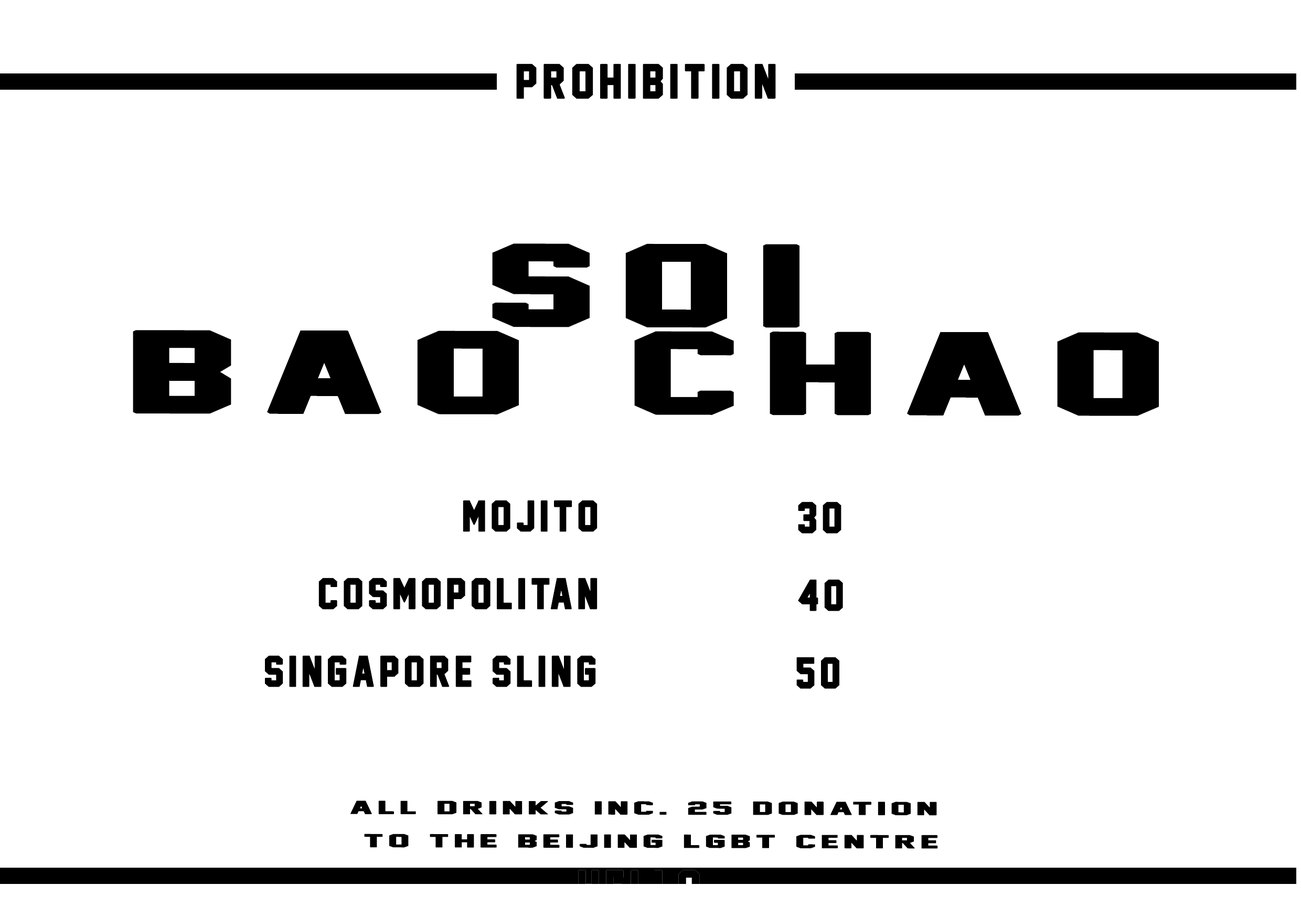
<style>
.page{position:relative;width:1301px;height:917px;background:#ffffff}
.page>*{position:absolute;margin:0}
.t1{font:43.7px "JerseyM54";letter-spacing:0.1em;color:#000000;font-weight:bold}
.t2{font:104.9px/87.4px "JerseyM54";letter-spacing:0.1em;color:#000000;font-weight:bold;scale:2.04 1}
.t3{font:39.3px "JerseyM54";letter-spacing:0.1em;color:#000000;font-weight:bold}
.t4{font:39.6px "JerseyM54";letter-spacing:0.1em;color:#000000;font-weight:bold}
.t5{font:16.8px/33.2px "JerseyM54";letter-spacing:0.1em;color:#000000;font-weight:bold;scale:2.4 1}
</style>
<div class="page">
<p class="t1" style="left:516px;top:63px;width:260px;height:36px">prohibition</p>
<p class="t2" style="left:133px;top:243px;width:1026px;height:173px;text-align:center">soi<br>bao chao</p>
<p class="t3" style="left:463px;top:500px;width:134px;height:32px">mojito</p>
<p class="t4" style="left:798px;top:501px;width:43px;height:32px">30</p>
<p class="t3" style="left:318px;top:577px;width:279px;height:32px">cosmopolitan</p>
<p class="t4" style="left:798px;top:579px;width:45px;height:32px">40</p>
<p class="t3" style="left:265px;top:655px;width:331px;height:32px">singapore sling</p>
<p class="t4" style="left:796px;top:657px;width:43px;height:32px">50</p>
<p class="t5" style="left:350px;top:800px;width:588px;height:49px;text-align:center">all drinks inc. 25 donation<br> to the beijing lgbt centre</p>
</div>
